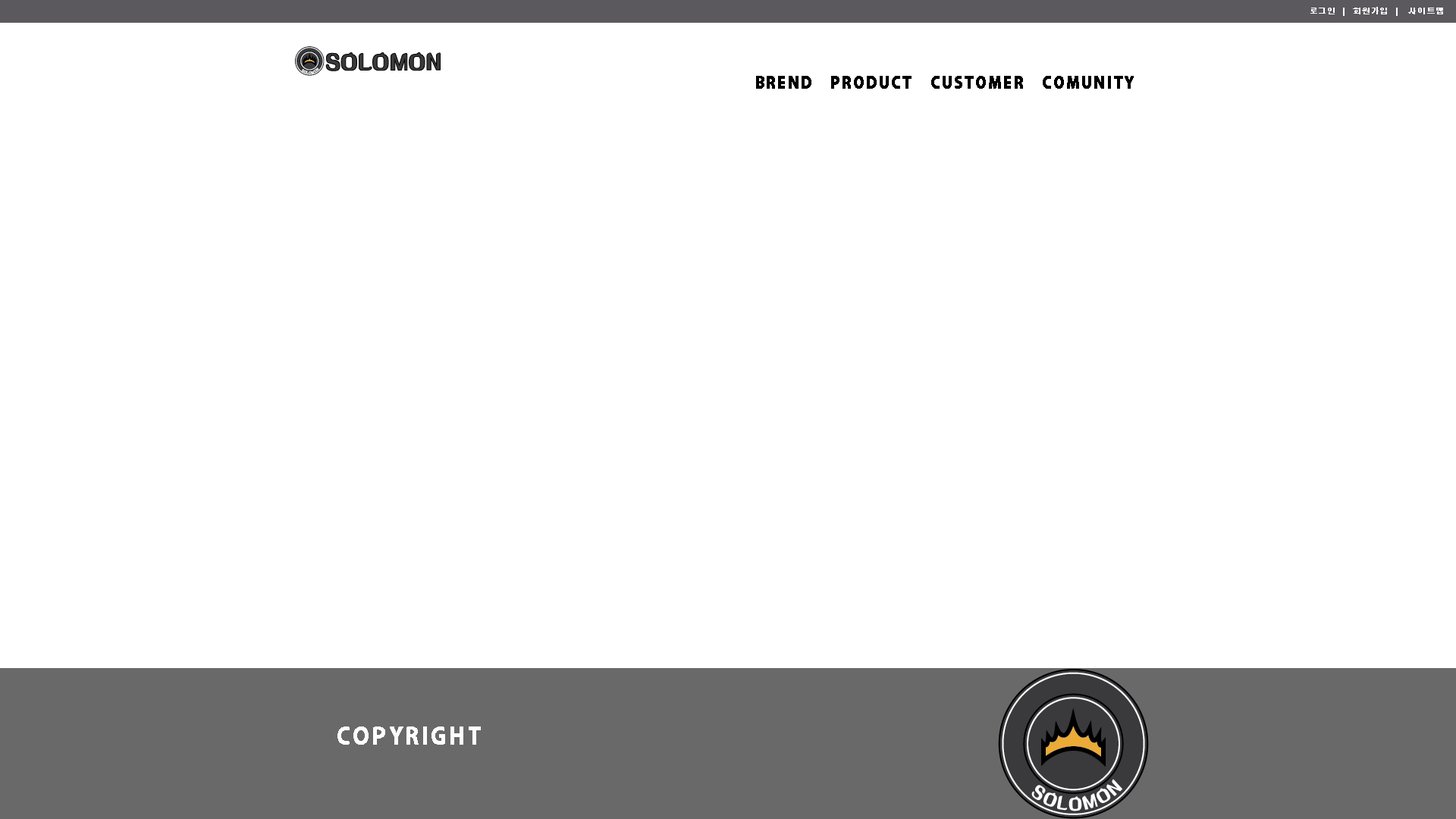
<style>
.page{position:relative;width:1456px;height:819px;background:#ffffff}
.page>*{position:absolute;margin:0}
.t1{font:7.6px "AdobeGothicStd-Bold";letter-spacing:0.11em;color:#ffffff;text-transform:uppercase;font-weight:bold}
.t2{font:15.2px "AdobeGothicStd-Bold";letter-spacing:0.11em;color:#000000;text-transform:uppercase;font-weight:bold}
.t3{font:22.7px "AdobeGothicStd-Bold";letter-spacing:0.11em;color:#ffffff;text-transform:uppercase;font-weight:bold}
</style>
<div class="page">
<p class="t1" style="left:1310px;top:7px;width:133px;height:9px">로그인  |  회원가입  |   사이트맵</p>
<p class="t2" style="left:756px;top:76px;width:378px;height:13px">Brend   product   customer   comunity</p>
<p class="t3" style="left:337px;top:726px;width:144px;height:19px">Copyright</p>
</div>
